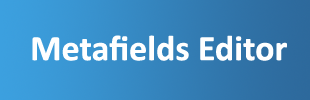
<style>
.page{position:relative;width:310px;height:100px}
.page>*{position:absolute;margin:0}
.t1{font:36px "Calibri-Bold";color:#ffffff}
</style>
<div class="page">
<p class="t1" style="left:32px;top:35px;width:255px;height:26px">Metafields Editor</p>
</div>
